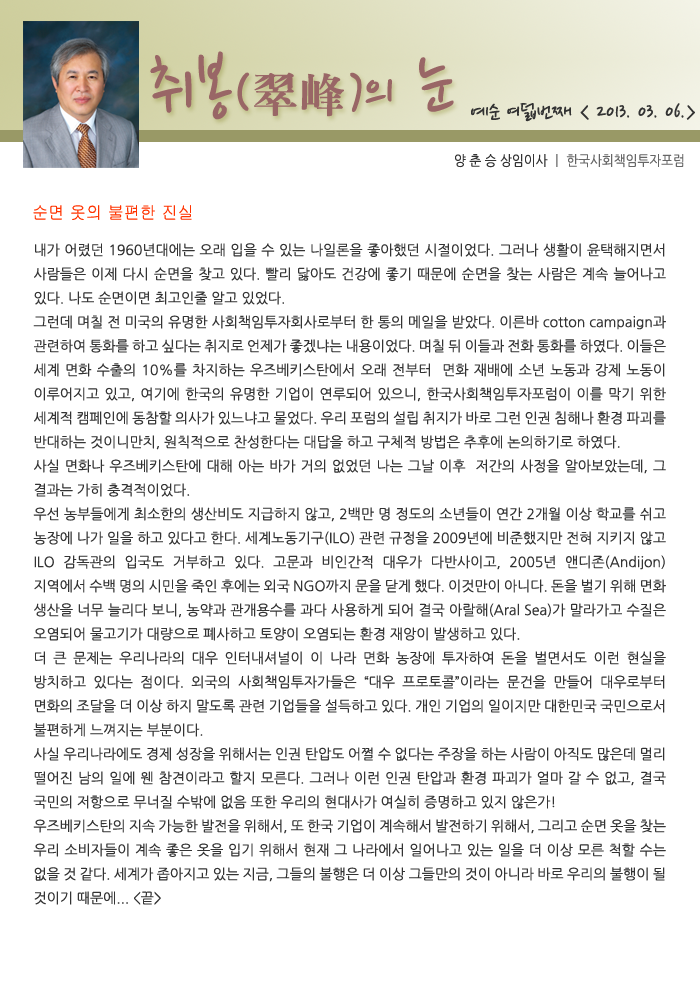
<style>
.page{position:relative;width:700px;height:992px;background:#ffffff}
.page>*{position:absolute;margin:0}
.t1{font:77.5px "NanumPen";color:#996666}
.t2{font:60px "NanumPen";color:#996666}
.t3{font:48px "H2mjrE";color:#996666}
.t4{font:24px "NanumPen";color:#333333}
.t5{font:14px "NanumGothic";color:#666666;scale:0.9 1}
.t6{font:14px "NanumGothic";color:#333333;scale:0.9 1}
.t7{font:18px "Gulim";color:#ff3300;scale:0.9 1}
.t8{font:14px/24px "NanumGothic";color:#333333}
</style>
<div class="page">
<p class="t1" style="left:150px;top:51px;width:304px;height:69px">취봉<span class="t2">(</span><span class="t3">翠峰</span><span class="t2">)</span><span class="t2">의</span> 눈</p>
<p class="t4" style="left:471px;top:103px;width:224px;height:19px">예순 여덟번째 &lt; 2013. 03. 06.&gt;</p>
<p class="t5" style="left:455px;top:154px;width:229px;height:14px"><span class="t6">양 춘 승 상임이사 </span>ㅣ 한국사회책임투자포럼</p>
<p class="t7" style="left:33px;top:205px;width:159px;height:15px">순면 옷의 불편한 진실</p>
<p class="t8" style="left:33px;top:243px;width:633px;height:662px;text-align:justify">내가 어렸던 1960년대에는 오래 입을 수 있는 나일론을 좋아했던 시절이었다. 그러나 생활이 윤택해지면서 사람들은 이제 다시 순면을 찾고 있다. 빨리 닳아도 건강에 좋기 때문에 순면을 찾는 사람은 계속 늘어나고 있다. 나도 순면이면 최고인줄 알고 있었다.<br>그런데 며칠 전 미국의 유명한 사회책임투자회사로부터 한 통의 메일을 받았다. 이른바 cotton campaign과 관련하여 통화를 하고 싶다는 취지로 언제가 좋겠냐는 내용이었다. 며칠 뒤 이들과 전화 통화를 하였다. 이들은 세계 면화 수출의 10%를 차지하는 우즈베키스탄에서 오래 전부터  면화 재배에 소년 노동과 강제 노동이 이루어지고 있고, 여기에 한국의 유명한 기업이 연루되어 있으니, 한국사회책임투자포럼이 이를 막기 위한 세계적 캠페인에 동참할 의사가 있느냐고 물었다. 우리 포럼의 설립 취지가 바로 그런 인권 침해나 환경 파괴를 반대하는 것이니만치, 원칙적으로 찬성한다는 대답을 하고 구체적 방법은 추후에 논의하기로 하였다.<br>사실 면화나 우즈베키스탄에 대해 아는 바가 거의 없었던 나는 그날 이후  저간의 사정을 알아보았는데, 그 결과는 가히 충격적이었다.<br>우선 농부들에게 최소한의 생산비도 지급하지 않고, 2백만 명 정도의 소년들이 연간 2개월 이상 학교를 쉬고 농장에 나가 일을 하고 있다고 한다. 세계노동기구(ILO) 관련 규정을 2009년에 비준했지만 전혀 지키지 않고 ILO 감독관의 입국도 거부하고 있다. 고문과 비인간적 대우가 다반사이고, 2005년 앤디존(Andijon) 지역에서 수백 명의 시민을 죽인 후에는 외국 NGO까지 문을 닫게 했다. 이것만이 아니다. 돈을 벌기 위해 면화 생산을 너무 늘리다 보니, 농약과 관개용수를 과다 사용하게 되어 결국 아랄해(Aral Sea)가 말라가고 수질은 오염되어 물고기가 대량으로 폐사하고 토양이 오염되는 환경 재앙이 발생하고 있다.<br>더 큰 문제는 우리나라의 대우 인터내셔널이 이 나라 면화 농장에 투자하여 돈을 벌면서도 이런 현실을 방치하고 있다는 점이다. 외국의 사회책임투자가들은 “대우 프로토콜”이라는 문건을 만들어 대우로부터 면화의 조달을 더 이상 하지 말도록 관련 기업들을 설득하고 있다. 개인 기업의 일이지만 대한민국 국민으로서 불편하게 느껴지는 부분이다.<br>사실 우리나라에도 경제 성장을 위해서는 인권 탄압도 어쩔 수 없다는 주장을 하는 사람이 아직도 많은데 멀리 떨어진 남의 일에 웬 참견이라고 할지 모른다. 그러나 이런 인권 탄압과 환경 파괴가 얼마 갈 수 없고, 결국 국민의 저항으로 무너질 수밖에 없음 또한 우리의 현대사가 여실히 증명하고 있지 않은가!  <br>우즈베키스탄의 지속 가능한 발전을 위해서, 또 한국 기업이 계속해서 발전하기 위해서, 그리고 순면 옷을 찾는 우리 소비자들이 계속 좋은 옷을 입기 위해서 현재 그 나라에서 일어나고 있는 일을 더 이상 모른 척할 수는 없을 것 같다. 세계가 좁아지고 있는 지금, 그들의 불행은 더 이상 그들만의 것이 아니라 바로 우리의 불행이 될 것이기 때문에... &lt;끝&gt;</p>
</div>
